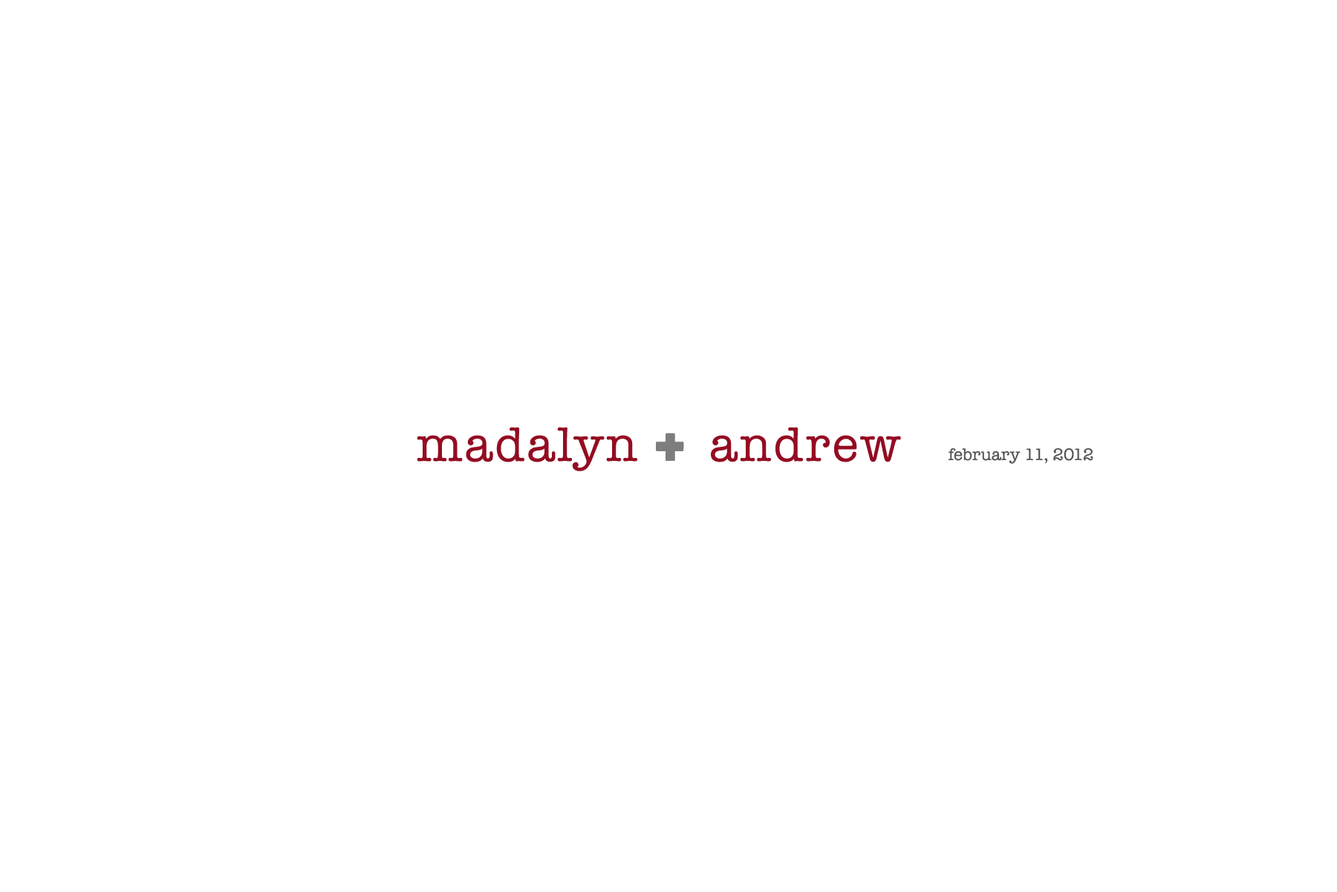
<style>
.page{position:relative;width:1337px;height:892px;background:#ffffff}
.page>*{position:absolute;margin:0}
.t1{font:49.3px "AmericanTypewriter";letter-spacing:0.05em;color:#940c22}
.t2{font:55.7px "Musa-Ornata";letter-spacing:0.05em;color:#7d7d7d}
.t3{font:17px "AmericanTypewriter";color:#585858}
</style>
<div class="page">
<p class="t1" style="left:417px;top:427px;width:484px;height:44px">madalyn <span class="t2">+ </span>andrew</p>
<p class="t3" style="left:948px;top:448px;width:146px;height:16px">february 11, 2012</p>
</div>
